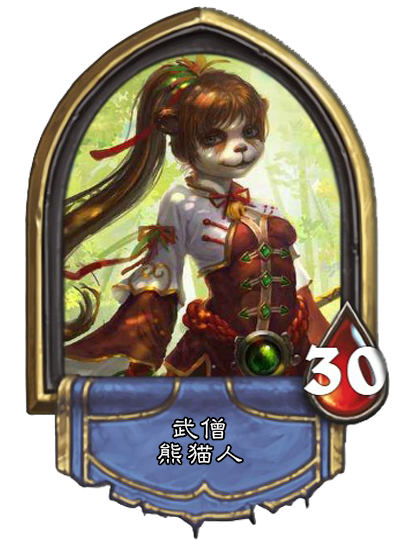
<style>
.page{position:relative;width:400px;height:540px;background:#ffffff}
.page>*{position:absolute;margin:0}
.t1{font:28px/25px "GBJenLei-Medium";letter-spacing:0.05em;color:#ffffff}
</style>
<div class="page">
<p class="t1" style="left:158px;top:418px;width:84px;height:46px;text-align:center">武僧<br>熊猫人</p>
</div>
